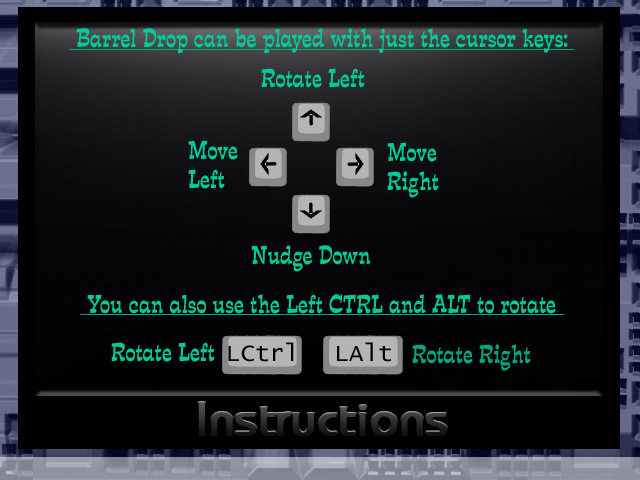
<style>
.page{position:relative;width:640px;height:480px}
.page>*{position:absolute;margin:0}
.t1{font:24px "Expose-Condensed-Normal";color:#00cc99}
.t2{font:24px "Expose-Condensed-Normal";color:#00a67c}
</style>
<div class="page">
<p class="t1" style="left:76px;top:28px;width:492px;height:26px">Barrel Drop can be played with just the cursor keys:</p>
<p class="t1" style="left:261px;top:68px;width:104px;height:20px">Rotate Left</p>
<p class="t1" style="left:188px;top:140px;width:50px;height:49px">Move<br>Left</p>
<p class="t1" style="left:387px;top:142px;width:52px;height:56px">Move<br>Right</p>
<p class="t1" style="left:251px;top:245px;width:120px;height:27px">Nudge Down</p>
<p class="t1" style="left:87px;top:294px;width:469px;height:20px">You can also use the Left CTRL and ALT to rotate</p>
<p class="t1" style="left:111px;top:342px;width:104px;height:20px">Rotate Left</p>
<p class="t2" style="left:412px;top:344px;width:119px;height:27px">Rotate Right</p>
</div>
